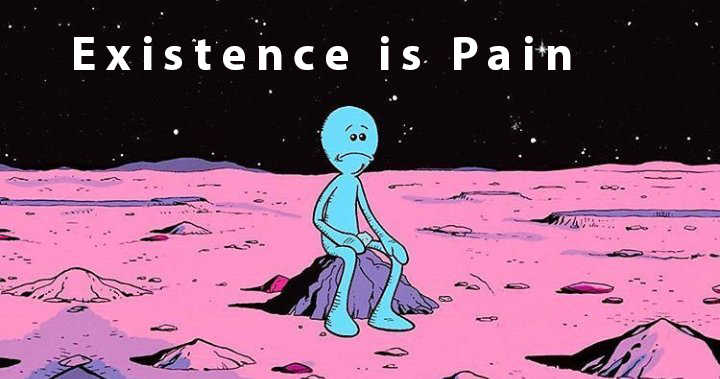
<style>
.page{position:relative;width:720px;height:379px;background:#0c0608}
.page>*{position:absolute;margin:0}
.t1{font:48px "MyriadPro-Bold";letter-spacing:0.2em;color:#ffffff}
</style>
<div class="page">
<p class="t1" style="left:74px;top:36px;width:497px;height:34px">Existence is Pain</p>
</div>
